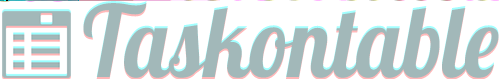
<style>
.page{position:relative;width:499px;height:79px;background:#ffffff}
.page>*{position:absolute;margin:0}
.t1{font:101.2px "Lobster-Regular";color:#a2b8b9;scale:0.87 1}
</style>
<div class="page">
<p class="t1" style="left:83px;top:1px;width:416px;height:77px">Taskontable</p>
</div>
